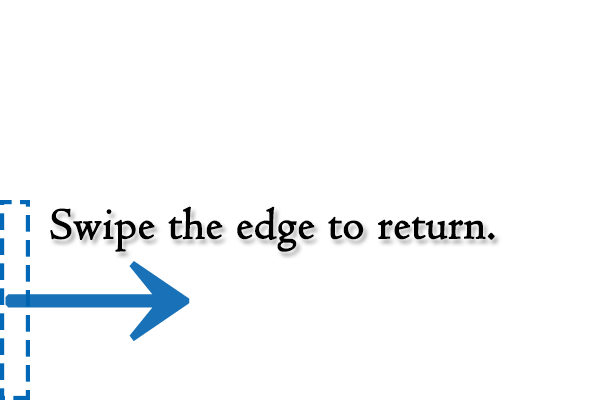
<style>
.page{position:relative;width:600px;height:400px;background:#ffffff}
.page>*{position:absolute;margin:0}
.t1{font:45.8px "Centaur";color:#000000;font-weight:bold}
.t2{font:200px "Gulim";color:#1972b7;font-weight:bold}
</style>
<div class="page">
<p class="t1" style="left:50px;top:206px;width:445px;height:46px">Swipe the edge to return.</p>
<p class="t2" style="left:5px;top:261px;width:185px;height:80px">→</p>
</div>
